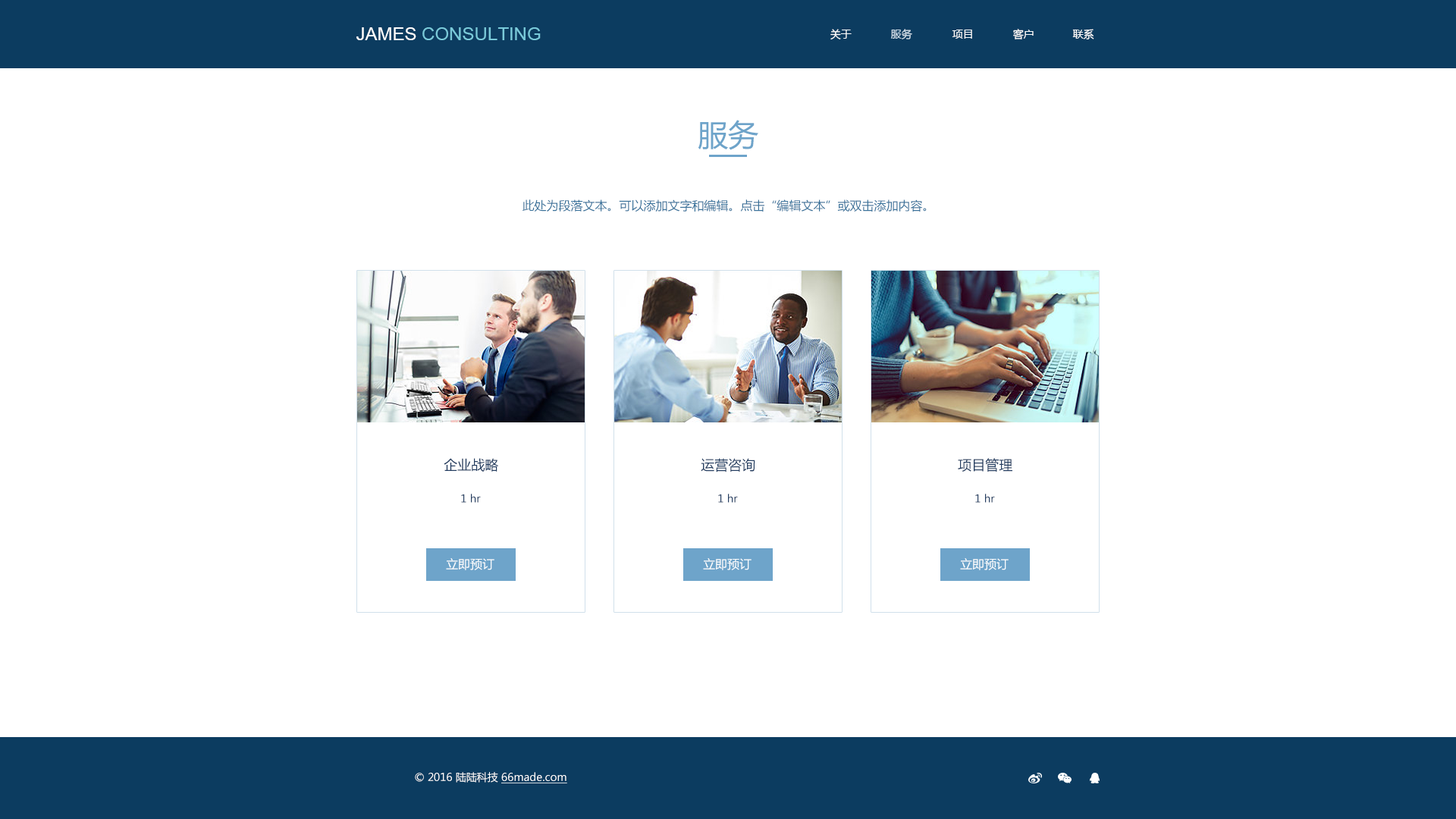
<style>
.page{position:relative;width:1456px;height:819px;background:#ffffff}
.page>*{position:absolute;margin:0}
.t1{font:18.2px "ArialMT";color:#79cada}
.t2{font:18.2px "ArialMT";color:#ffffff}
.t3{font:10.6px "MicrosoftYaHei";color:#ffffff}
.t4{font:10.6px "MicrosoftYaHei";color:#d1e0eb}
.t5{font:30.3px "MicrosoftYaHei";color:#6ea4ca}
.t6{font:12.1px "MicrosoftYaHei";color:#39729b}
.t7{font:13.6px "MicrosoftYaHei";color:#223c60}
.t8{font:10.6px "MicrosoftYaHei";color:#223c60}
.t9{font:12.1px "MicrosoftYaHei";color:#ffffff}
.t10{font:10.6px "MicrosoftYaHei";color:#ffffff;text-decoration:underline}
</style>
<div class="page">
<p class="t1" style="left:356px;top:27px;width:185px;height:13px"><span class="t2">JAMES </span>CONSULTING</p>
<p class="t3" style="left:830px;top:29px;width:22px;height:10px">关于</p>
<p class="t4" style="left:891px;top:29px;width:21px;height:10px">服务</p>
<p class="t3" style="left:952px;top:30px;width:20px;height:9px">项目</p>
<p class="t3" style="left:1013px;top:29px;width:21px;height:10px">客户</p>
<p class="t3" style="left:1072px;top:29px;width:22px;height:10px">联系</p>
<p class="t5" style="left:698px;top:120px;width:60px;height:30px">服务</p>
<p class="t6" style="left:522px;top:199px;width:405px;height:13px">此处为段落文本。可以添加文字和编辑。点击“编辑文本”或双击添加内容。</p>
<p class="t7" style="left:444px;top:458px;width:54px;height:14px">企业战略</p>
<p class="t7" style="left:701px;top:458px;width:54px;height:14px">运营咨询</p>
<p class="t7" style="left:958px;top:458px;width:54px;height:14px">项目管理</p>
<p class="t8" style="left:461px;top:494px;width:20px;height:9px">1 hr</p>
<p class="t8" style="left:718px;top:494px;width:20px;height:9px">1 hr</p>
<p class="t8" style="left:975px;top:494px;width:20px;height:9px">1 hr</p>
<p class="t9" style="left:446px;top:558px;width:48px;height:12px">立即预订</p>
<p class="t9" style="left:703px;top:558px;width:48px;height:12px">立即预订</p>
<p class="t9" style="left:960px;top:558px;width:49px;height:12px">立即预订</p>
<p class="t3" style="left:415px;top:772px;width:152px;height:11px">© 2016 陆陆科技 <span class="t10">66made.com</span></p>
</div>
